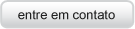
<style>
.page{position:relative;width:135px;height:29px}
.page>*{position:absolute;margin:0}
.t1{font:13px "ArialMT";color:#222222}
</style>
<div class="page">
<p class="t1" style="left:18px;top:10px;width:97px;height:10px">entre em contato</p>
</div>
